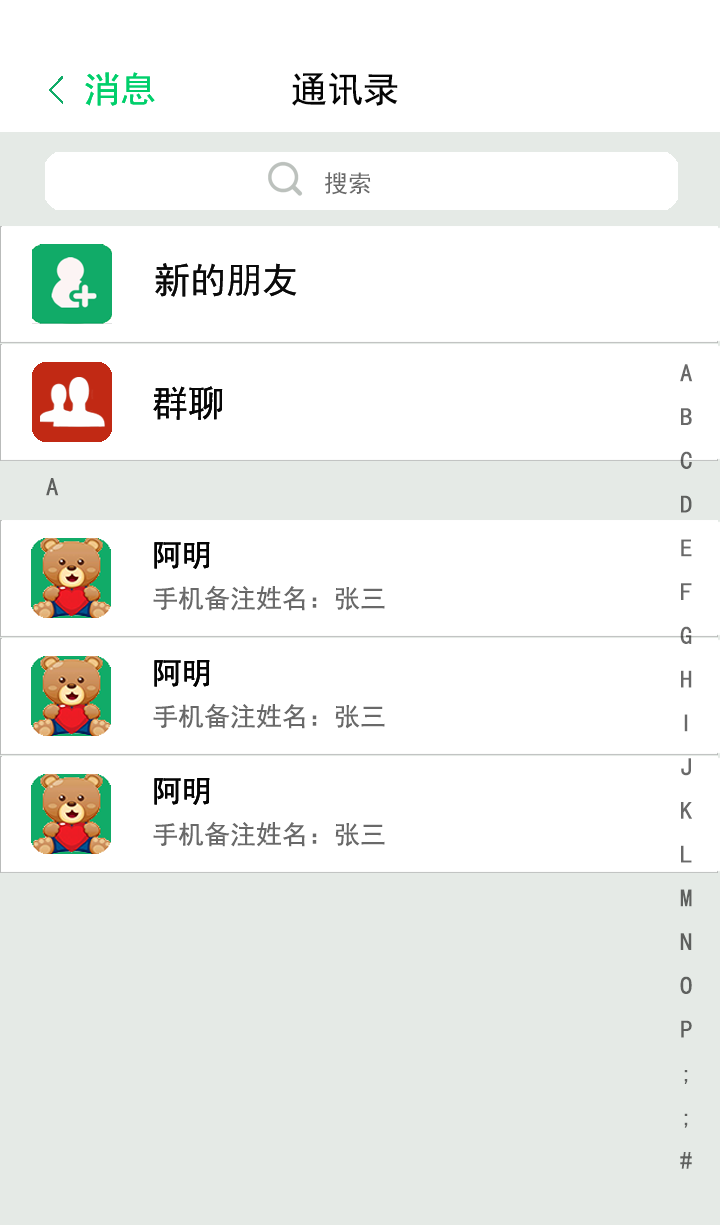
<style>
.page{position:relative;width:720px;height:1225px;background:#ffffff}
.page>*{position:absolute;margin:0}
.t1{font:36px "SimHei";color:#040404}
.t2{font:24px "SimHei";color:#6a6a6a}
.t3{font:25px "SimHei";color:#696969}
.t4{font:25px "SimHei";color:#5e605e}
.t5{font:26px "SimHei";color:#696969}
</style>
<div class="page">
<p class="t1" style="left:292px;top:72px;width:106px;height:34px">通讯录</p>
<p class="t2" style="left:325px;top:172px;width:46px;height:23px">搜索</p>
<p class="t3" style="left:680px;top:364px;width:13px;height:805px">A<br>B<br>C<br>D<br>E<br>F<br>G<br>H<br>I<br>J<br>K<br>L<br>M<br>N<br>O<br>P<br>;<br>;<br>#</p>
<p class="t4" style="left:46px;top:478px;width:13px;height:18px">A</p>
<p class="t5" style="left:153px;top:585px;width:232px;height:26px">手机备注姓名：张三</p>
<p class="t5" style="left:153px;top:703px;width:232px;height:26px">手机备注姓名：张三</p>
<p class="t5" style="left:153px;top:821px;width:232px;height:26px">手机备注姓名：张三</p>
</div>
